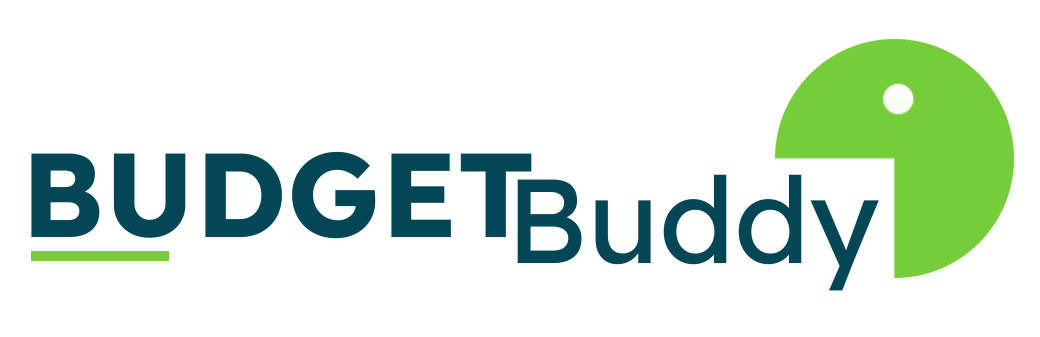
<style>
.page{position:relative;width:1040px;height:337px;background:#ffffff}
.page>*{position:absolute;margin:0}
.t1{font:119.2px "Lexend-Bold";color:#034757}
.t2{font:119.2px "Lexend-Regular";color:#034757}
</style>
<div class="page">
<p class="t1" style="left:31px;top:151px;width:501px;height:88px">BUDGET</p>
<p class="t2" style="left:517px;top:174px;width:362px;height:117px">Buddy</p>
</div>
